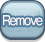
<style>
.page{position:relative;width:45px;height:42px}
.page>*{position:absolute;margin:0}
.t1{font:13px "GothicMB101Pro-Medium";letter-spacing:-0.12em;color:#fff6f2;scale:0.8 1}
</style>
<div class="page">
<p class="t1" style="left:3px;top:15px;width:40px;height:11px">Remove</p>
</div>
